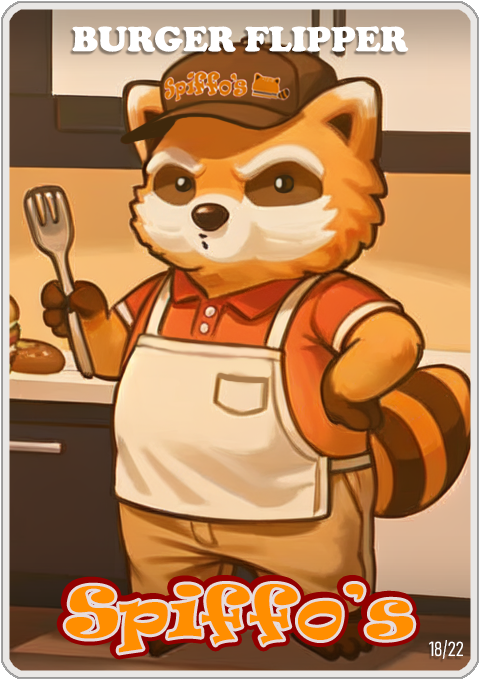
<style>
.page{position:relative;width:480px;height:680px}
.page>*{position:absolute;margin:0}
.t1{font:36px "CooperBlack";color:#ffffff}
.t2{font:65px "Ravie";color:#ff8e00}
.t3{font:20px "Bahnschrift-LightCondensed";color:#ffffff}
</style>
<div class="page">
<p class="t1" style="left:72px;top:26px;width:337px;height:26px">BURGER FLIPPER</p>
<p class="t2" style="left:65px;top:584px;width:349px;height:69px">Spiffo’s</p>
<p class="t3" style="left:429px;top:640px;width:34px;height:19px">18/22</p>
</div>
